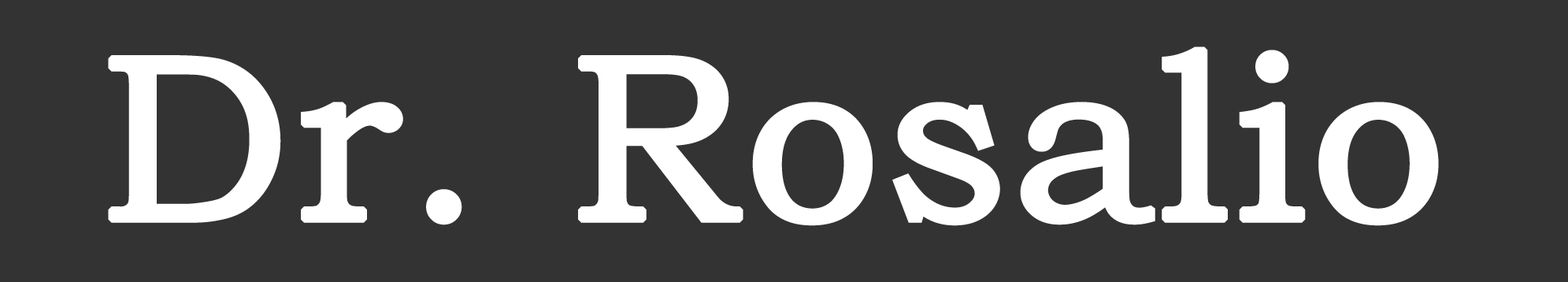
<style>
.page{position:relative;width:1568px;height:282px;background:#333333}
.page>*{position:absolute;margin:0}
.t1{font:236.3px "BookmanOldStyle";color:#ffffff;font-weight:bold}
</style>
<div class="page">
<p class="t1" style="left:108px;top:46px;width:1331px;height:180px">Dr. Rosalio</p>
</div>
